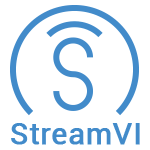
<style>
.page{position:relative;width:150px;height:150px;background:#ffffff}
.page>*{position:absolute;margin:0}
.t1{font:30.4px "Roboto-Regular";color:#428bca;font-weight:bold}
</style>
<div class="page">
<p class="t1" style="left:11px;top:123px;width:129px;height:22px">StreamVI</p>
</div>
